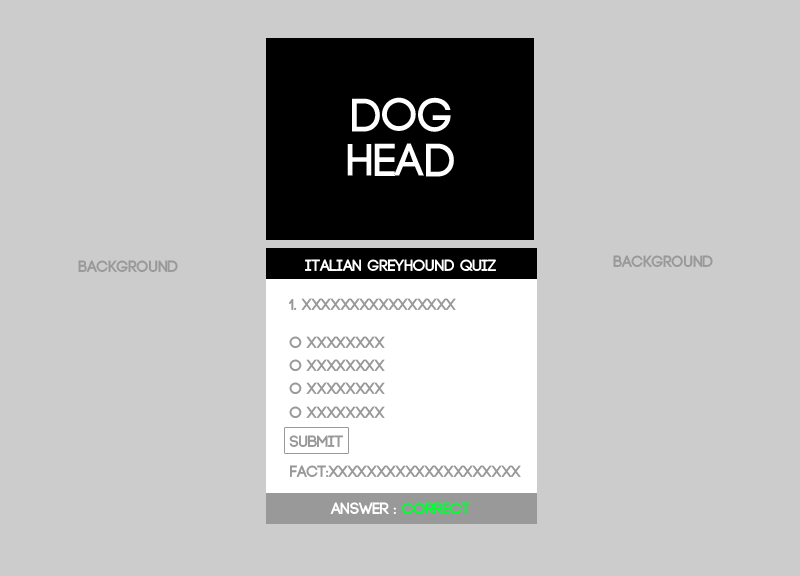
<style>
.page{position:relative;width:800px;height:576px;background:#cccccc}
.page>*{position:absolute;margin:0}
.t1{font:47.1px/44.7px "Code-Bold";color:#ffffff}
.t2{font:16px "Code-Bold";color:#999999}
.t3{font:16px "Code-Bold";color:#ffffff}
.t4{font:16px/23.2px "Code-Bold";color:#999999}
.t5{font:16px/15.2px "Code-Bold";color:#999999}
.t6{font:16px/29.2px "Code-Bold";color:#999999}
.t7{font:16px "Code-Bold";color:#00ff33}
</style>
<div class="page">
<p class="t1" style="left:347px;top:97px;width:107px;height:80px;text-align:center">DOG<br>HEAD</p>
<p class="t2" style="left:613px;top:255px;width:100px;height:12px">BACKGROUND</p>
<p class="t2" style="left:78px;top:260px;width:100px;height:12px">BACKGROUND</p>
<p class="t3" style="left:305px;top:259px;width:191px;height:12px">Italian Greyhound Quiz</p>
<p class="t4" style="left:288px;top:298px;width:233px;height:179px"><span class="t5">1. XXXXXXXXXXXXXXXX<br><br></span>O XXXXXXXX<br>O XXXXXXXX<br>O XXXXXXXX<br>O XXXXXXXX<br><span class="t6">Submit<br></span><span class="t5"><br>FACT:XXXXXXXXXXXXXXXXXXXX</span></p>
<p class="t3" style="left:330px;top:502px;width:140px;height:12px">ANSWER : <span class="t7">Correct</span></p>
</div>
